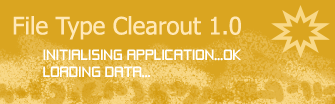
<style>
.page{position:relative;width:335px;height:104px;background:#daa520}
.page>*{position:absolute;margin:0}
.t1{font:24px "Tahoma";color:#ffe8b7}
.t2{font:14px "ZeroThrees";color:#ffffff}
</style>
<div class="page">
<p class="t1" style="left:13px;top:16px;width:228px;height:24px">File Type Clearout 1.0</p>
<p class="t2" style="left:43px;top:49px;width:198px;height:29px">INITIALISING APPLICATION...OK<br>LOADING DATA...</p>
</div>
